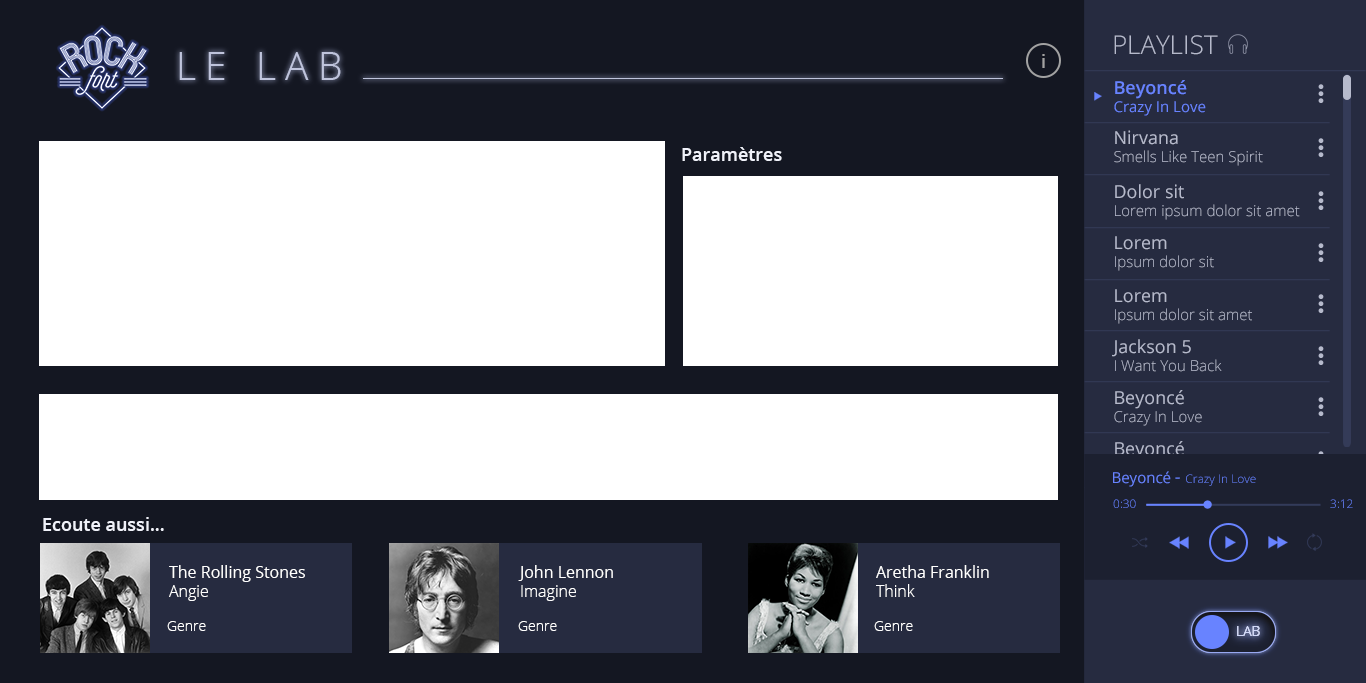
<style>
.page{position:relative;width:1366px;height:683px;background:#ffffff}
.page>*{position:absolute;margin:0}
.t1{font:26px "OpenSans-Light";color:#b6bacc}
.t2{font:39px "OpenSans-Light";letter-spacing:0.24em;color:#bfc4dc}
.t3{font:18px "OpenSans-Semibold";color:#a2a2a2}
.t4{font:15px "OpenSans";color:#6883ff}
.t5{font:18px "OpenSans-Semibold";color:#6883ff}
.t6{font:15px "OpenSans-Light";color:#b6bacc}
.t7{font:18px "OpenSans";color:#b6bacc}
.t8{font:18px "OpenSans-Semibold";color:#f0f2fa}
.t9{font:12px "OpenSans-Light";color:#6883ff}
.t10{font:18px "OpenSans";color:#6883ff}
.t11{font:12px "OpenSans-Light"}
.t12{font:16px "OpenSans";color:#ffffff}
.t13{font:16px "OpenSans-Light";color:#ffffff}
.t14{font:14px "OpenSans-Light";color:#ffffff}
.t15{font:14px "OpenSans-Light";color:#e6eaff}
.t16{font:14px "OpenSans-Light";color:#d2d9f9}
</style>
<div class="page">
<p class="t1" style="left:1114px;top:35px;width:104px;height:20px">PLAYLIST</p>
<p class="t2" style="left:179px;top:52px;width:162px;height:28px">LE LAB</p>
<p class="t3" style="left:1042px;top:54px;width:3px;height:14px">i</p>
<p class="t4" style="left:1114px;top:80px;width:92px;height:36px"><span class="t5">Beyoncé <br></span>Crazy In Love</p>
<p class="t6" style="left:1114px;top:130px;width:149px;height:36px"><span class="t7">Nirvana<br></span>Smells Like Teen Spirit</p>
<p class="t8" style="left:682px;top:147px;width:100px;height:14px">Paramètres</p>
<p class="t6" style="left:1115px;top:184px;width:185px;height:36px"><span class="t7">Dolor sit<br></span>Lorem ipsum dolor sit amet</p>
<p class="t6" style="left:1115px;top:236px;width:99px;height:35px"><span class="t7">Lorem<br></span>Ipsum dolor sit</p>
<p class="t6" style="left:1115px;top:289px;width:137px;height:35px"><span class="t7">Lorem<br></span>Ipsum dolor sit amet</p>
<p class="t6" style="left:1112px;top:339px;width:110px;height:33px"><span class="t7">Jackson 5<br></span>I Want You Back</p>
<p class="t6" style="left:1114px;top:390px;width:88px;height:36px"><span class="t7">Beyoncé<br></span>Crazy In Love</p>
<p class="t6" style="left:1114px;top:441px;width:88px;height:36px"><span class="t7">Beyoncé<br></span>Crazy In Love</p>
<p class="t9" style="left:1113px;top:471px;width:143px;height:16px"><span class="t4">Beyoncé </span><span class="t10">- </span>Crazy In Love</p>
<p class="t11" style="left:1113px;top:499px;width:23px;height:9px">0:30</p>
<p class="t11" style="left:1330px;top:499px;width:23px;height:9px">3:12</p>
<p class="t8" style="left:43px;top:517px;width:121px;height:14px">Ecoute aussi...</p>
<p class="t12" style="left:169px;top:565px;width:136px;height:36px;text-align:justify">The Rolling Stones<br><span class="t13">Angie</span></p>
<p class="t12" style="left:518px;top:565px;width:95px;height:36px;text-align:justify">John Lennon<br><span class="t13">Imagine</span></p>
<p class="t12" style="left:876px;top:565px;width:113px;height:32px;text-align:justify">Aretha Franklin<br><span class="t13">Think</span></p>
<p class="t14" style="left:167px;top:621px;width:39px;height:10px">Genre</p>
<p class="t14" style="left:518px;top:621px;width:39px;height:10px">Genre</p>
<p class="t14" style="left:874px;top:621px;width:39px;height:10px">Genre</p>
<p class="t15" style="left:1237px;top:626px;width:23px;height:10px">LAB</p>
<p class="t16" style="left:1237px;top:626px;width:23px;height:10px">LAB</p>
</div>
